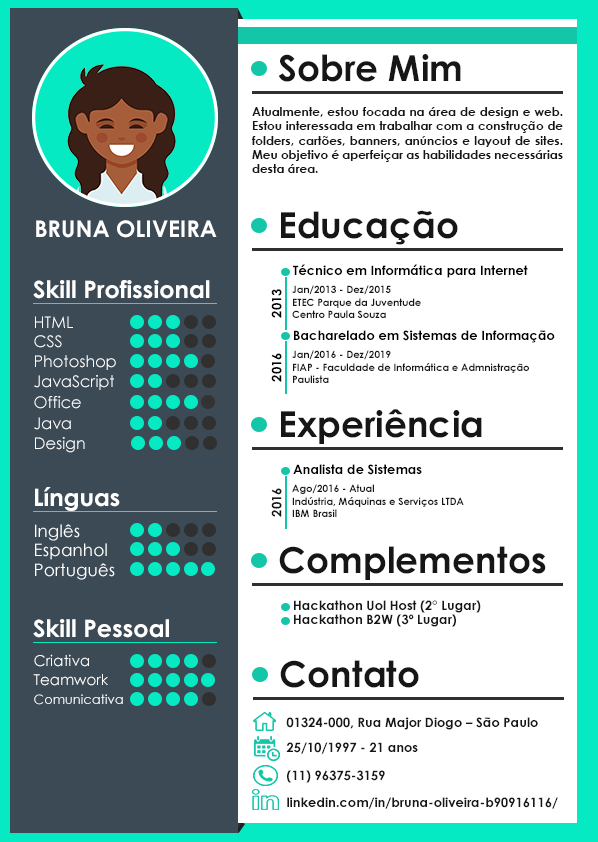
<style>
.page{position:relative;width:598px;height:842px;background:#ffffff}
.page>*{position:absolute;margin:0}
.t1{font:36px "CenturyGothic-Bold";color:#161616}
.t2{font:12px "CenturyGothic-Bold";color:#161616}
.t3{font:23px "CenturyGothic-Bold";color:#ffffff}
.t4{font:13px "CenturyGothic-Bold";color:#000000}
.t5{font:24px "CenturyGothic-Bold";color:#fefefe}
.t6{font:10px "CenturyGothic-Bold";color:#161616}
.t7{font:16px "CenturyGothic";color:#ffffff}
.t8{font:24px "CenturyGothic-Bold";color:#ffffff}
.t9{font:13px "CenturyGothic-Bold";color:#161616}
.t10{font:17px "CenturyGothic";color:#ffffff}
.t11{font:17px "CenturyGothic";color:#fefffe}
.t12{font:15px "CenturyGothic";color:#ffffff}
.t13{font:13px "CenturyGothic";color:#fefefe}
</style>
<div class="page">
<p class="t1" style="left:278px;top:54px;width:183px;height:28px">Sobre Mim</p>
<p class="t2" style="left:251px;top:107px;width:312px;height:66px;text-align:justify">Atualmente, estou focada na área de design e web. Estou interessada em trabalhar com a construção de  folders, cartões, banners, anúncios e layout de sites. Meu objetivo é aperfeiçar as habilidades necessárias desta área.</p>
<p class="t3" style="left:36px;top:220px;width:181px;height:18px">BRUNA OLIVEIRA</p>
<p class="t1" style="left:281px;top:210px;width:177px;height:35px">Educação</p>
<p class="t4" style="left:293px;top:264px;width:235px;height:14px">Técnico em Informática para Internet</p>
<p class="t5" style="left:33px;top:280px;width:177px;height:19px">Skill Profissional</p>
<p class="t4" style="left:271px;top:289px;width:11px;height:29px;rotate:-90deg">2013</p>
<p class="t6" style="left:292px;top:285px;width:99px;height:10px">Jan/2013 - Dez/2015</p>
<p class="t6" style="left:292px;top:298px;width:129px;height:20px">ETEC Parque da Juventude<br>Centro Paula Souza</p>
<p class="t7" style="left:35px;top:316px;width:38px;height:12px">HTML</p>
<p class="t7" style="left:34px;top:335px;width:28px;height:13px">CSS</p>
<p class="t4" style="left:294px;top:330px;width:261px;height:13px">Bacharelado em Sistemas de Informação</p>
<p class="t4" style="left:271px;top:353px;width:11px;height:29px;rotate:-90deg">2016</p>
<p class="t6" style="left:292px;top:350px;width:99px;height:10px">Jan/2016 - Dez/2019</p>
<p class="t7" style="left:35px;top:355px;width:81px;height:15px">Photoshop</p>
<p class="t6" style="left:293px;top:363px;width:236px;height:20px">FIAP - Faculdade de Informática e Admnistração Paulista</p>
<p class="t7" style="left:34px;top:375px;width:80px;height:15px">JavaScript</p>
<p class="t7" style="left:34px;top:396px;width:47px;height:13px">Office</p>
<p class="t1" style="left:281px;top:409px;width:201px;height:35px">Experiência</p>
<p class="t7" style="left:34px;top:417px;width:37px;height:13px">Java</p>
<p class="t7" style="left:35px;top:437px;width:50px;height:16px">Design</p>
<p class="t4" style="left:293px;top:464px;width:129px;height:11px">Analista de Sistemas</p>
<p class="t6" style="left:292px;top:484px;width:82px;height:10px">Ago/2016 - Atual</p>
<p class="t8" style="left:35px;top:487px;width:85px;height:24px">Línguas</p>
<p class="t9" style="left:271px;top:488px;width:11px;height:29px;rotate:-90deg">2016</p>
<p class="t6" style="left:292px;top:497px;width:172px;height:20px">Indústria, Máquinas e Serviços LTDA<br>IBM Brasil</p>
<p class="t10" style="left:35px;top:524px;width:45px;height:17px">Inglês</p>
<p class="t11" style="left:35px;top:543px;width:72px;height:17px">Espanhol</p>
<p class="t1" style="left:279px;top:546px;width:267px;height:34px">Complementos</p>
<p class="t10" style="left:35px;top:563px;width:80px;height:17px">Português</p>
<p class="t9" style="left:294px;top:600px;width:187px;height:13px">Hackathon Uol Host (2° Lugar)</p>
<p class="t9" style="left:294px;top:614px;width:162px;height:13px">Hackathon B2W (3º Lugar)</p>
<p class="t8" style="left:33px;top:619px;width:136px;height:19px">Skill Pessoal</p>
<p class="t12" style="left:34px;top:654px;width:55px;height:13px">Criativa</p>
<p class="t1" style="left:280px;top:660px;width:139px;height:28px">Contato</p>
<p class="t12" style="left:33px;top:674px;width:75px;height:12px">Teamwork</p>
<p class="t13" style="left:34px;top:694px;width:89px;height:11px">Comunicativa</p>
<p class="t9" style="left:286px;top:717px;width:252px;height:13px">01324-000, Rua Major Diogo – São Paulo</p>
<p class="t9" style="left:286px;top:742px;width:132px;height:12px">25/10/1997 - 21 anos</p>
<p class="t9" style="left:287px;top:770px;width:98px;height:13px">(11) 96375-3159</p>
<p class="t9" style="left:287px;top:797px;width:271px;height:12px">linkedin.com/in/bruna-oliveira-b90916116/</p>
</div>
